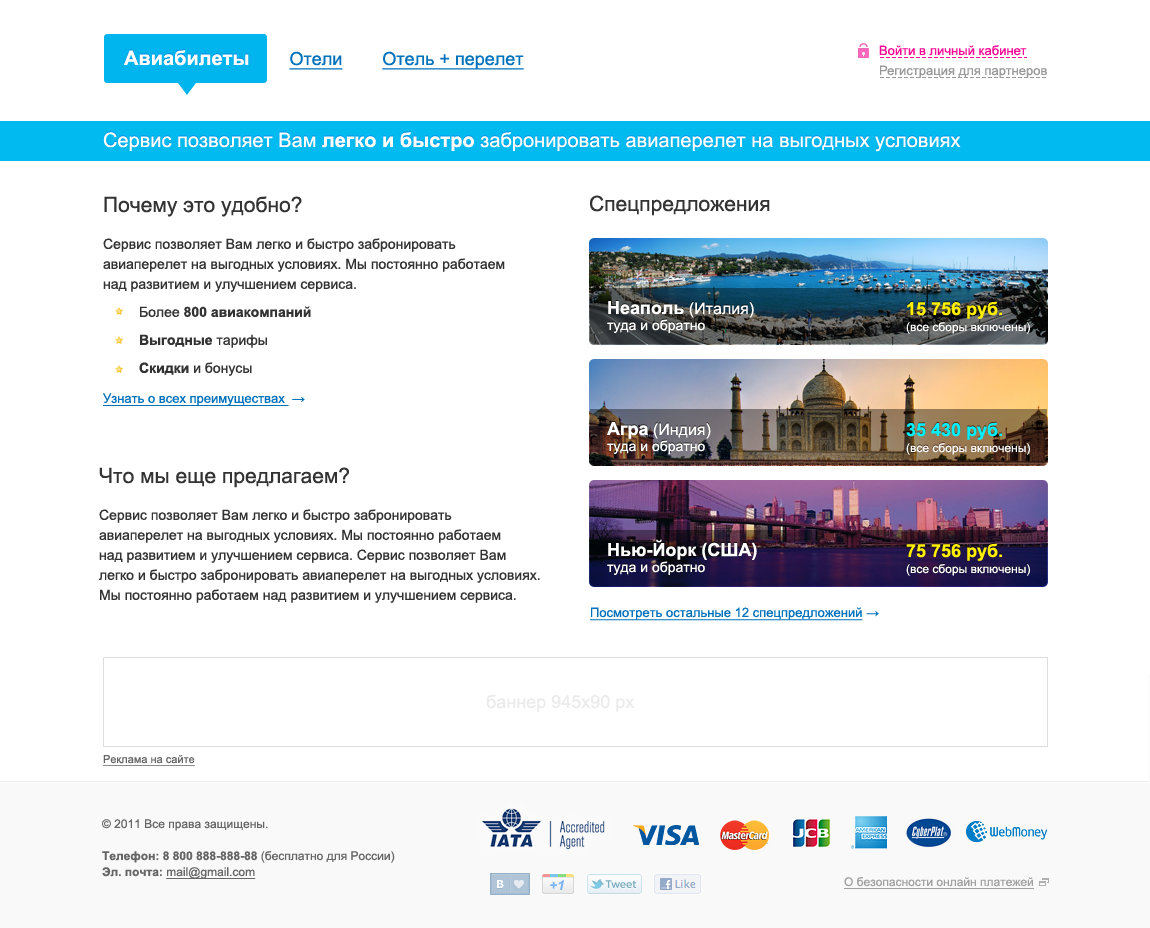
<style>
.page{position:relative;width:1150px;height:928px;background:#ffffff}
.page>*{position:absolute;margin:0}
.t1{font:18px "ArialMT";color:#0071bb;text-decoration:underline}
.t2{font:20px "Arial-BoldMT";color:#ffffff}
.t3{font:13px "ArialMT";color:#f80895}
.t4{font:13px "ArialMT";color:#999999}
.t5{font:20px "ArialMT";color:#ffffff}
.t6{font:14px/20px "ArialMT";color:#333333}
.t7{font:21px "ArialMT";color:#333333}
.t8{font:14px/28px "ArialMT";color:#333333}
.t9{font:14px/28px "Arial-BoldMT";color:#333333}
.t10{font:13px/30px "ArialMT";color:#0071bb;text-decoration:underline}
.t11{font:13px/30px "ArialMT";color:#0071bb}
.t12{font:14px/16px "ArialMT";color:#ffffff}
.t13{font:18px/16px "Arial-BoldMT";color:#ffffff}
.t14{font:16px/16px "ArialMT";color:#ffffff}
.t15{font:12px/16px "ArialMT";color:#ffffff}
.t16{font:18px/16px "Arial-BoldMT";color:#fff000}
.t17{font:18px/16px "Arial-BoldMT";color:#00f0ff}
.t18{font:13px "ArialMT";color:#0071bb;text-decoration:underline}
.t19{font:13px "ArialMT";color:#0071bb}
.t20{font:18px "ArialMT";color:#ebebeb}
.t21{font:11px "ArialMT";color:#666666;text-decoration:underline}
.t22{font:12px/16px "ArialMT";color:#666666}
.t23{font:12px/16px "Arial-BoldMT";color:#666666}
.t24{font:12px/16px "ArialMT";color:#666666;text-decoration:underline}
.t25{font:12px "ArialMT";color:#a1a1a1;text-decoration:underline}
</style>
<div class="page">
<p class="t1" style="left:124px;top:50px;width:400px;height:20px"><span class="t2">Авиабилеты        </span>Отели        Отель + перелет</p>
<p class="t3" style="left:879px;top:45px;width:148px;height:11px">Войти в личный кабинет</p>
<p class="t4" style="left:880px;top:65px;width:167px;height:13px">Регистрация для партнеров</p>
<p class="t5" style="left:103px;top:132px;width:858px;height:20px">Сервис позволяет Вам <span class="t2">легко и быстро</span> забронировать авиаперелет на выгодных условиях</p>
<p class="t6" style="left:103px;top:196px;width:402px;height:210px"><span class="t7">Почему это удобно? <br><br></span>Сервис позволяет Вам легко и быстро забронировать<br>авиаперелет на выгодных условиях. Мы постоянно работаем <br>над развитием и улучшением сервиса. <br><span class="t8"> Более </span><span class="t9">800 авиакомпаний<br> Выгодные</span><span class="t8"> тарифы<br></span><span class="t9"> Скидки</span><span class="t8"> и бонусы<br></span><span class="t10">Узнать о всех преимуществах </span><span class="t11"> →</span></p>
<p class="t7" style="left:590px;top:195px;width:180px;height:21px">Спецпредложения</p>
<p class="t12" style="left:607px;top:301px;width:147px;height:32px"><span class="t13">Неаполь</span><span class="t14"> (Италия)<br></span>туда и обратно</p>
<p class="t15" style="left:906px;top:301px;width:124px;height:33px"><span class="t16">15 756 руб.<br></span>(все сборы включены)</p>
<p class="t12" style="left:607px;top:422px;width:104px;height:32px"><span class="t13">Агра</span><span class="t14"> (Индия)<br></span>туда и обратно</p>
<p class="t15" style="left:906px;top:422px;width:124px;height:33px"><span class="t17">35 430 руб.<br></span>(все сборы включены)</p>
<p class="t6" style="left:99px;top:467px;width:441px;height:136px"><span class="t7">Что мы еще предлагаем? <br><br></span>Сервис позволяет Вам легко и быстро забронировать<br>авиаперелет на выгодных условиях. Мы постоянно работаем <br>над развитием и улучшением сервиса. Сервис позволяет Вам <br>легко и быстро забронировать авиаперелет на выгодных условиях. <br>Мы постоянно работаем над развитием и улучшением сервиса.</p>
<p class="t13" style="left:607px;top:539px;width:150px;height:36px">Нью-Йорк (США)<br><span class="t12">туда и обратно</span></p>
<p class="t15" style="left:906px;top:543px;width:124px;height:33px"><span class="t16">75 756 руб.<br></span>(все сборы включены)</p>
<p class="t18" style="left:590px;top:607px;width:289px;height:14px">Посмотреть остальные 12 спецпредложений<span class="t19"> →</span></p>
<p class="t20" style="left:486px;top:694px;width:149px;height:18px">баннер 945x90 px</p>
<p class="t21" style="left:103px;top:755px;width:92px;height:11px">Реклама на сайте</p>
<p class="t22" style="left:102px;top:819px;width:293px;height:60px">© 2011 Все права защищены.<br><br><span class="t23">Телефон: 8 800 888-888-88</span> (бесплатно для России)<br><span class="t23">Эл. почта: </span><span class="t24">mail@gmail.com</span></p>
<p class="t25" style="left:844px;top:877px;width:190px;height:12px">О безопасности онлайн платежей</p>
</div>
